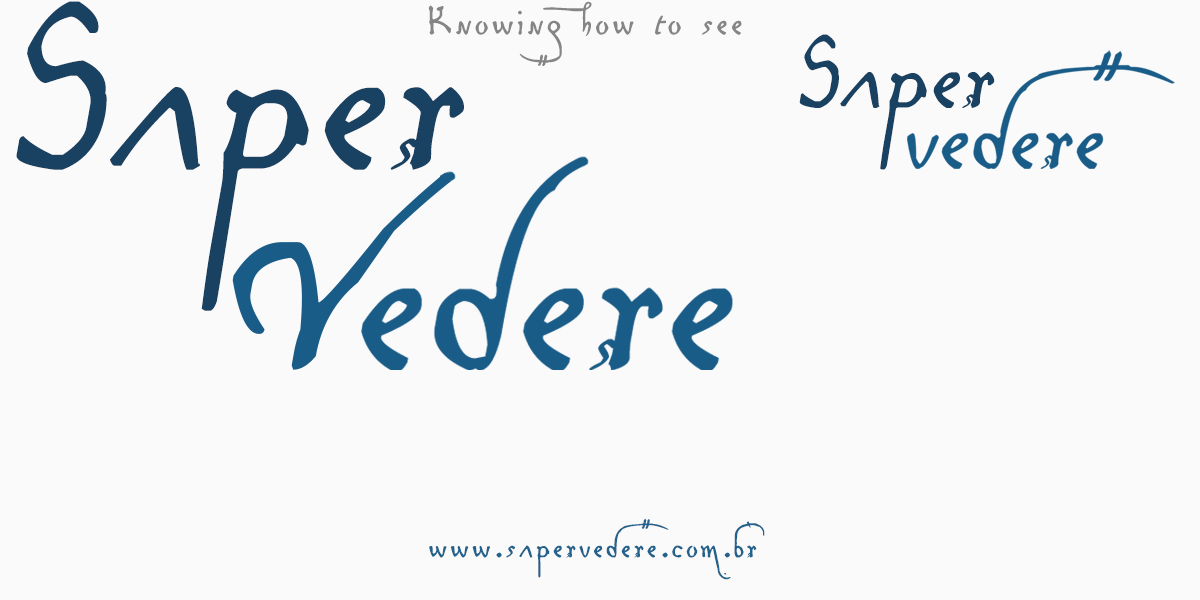
<style>
.page{position:relative;width:1200px;height:600px;background:#fafafa}
.page>*{position:absolute;margin:0}
.t1{font:337.6px "LeonardoHandF";color:#194162;font-style:italic}
.t2{font:55.9px "LeonardoHandF";letter-spacing:0.05em;color:#858585}
.t3{font:147.1px "LeonardoHandF";color:#194162;font-style:italic}
.t4{font:47.9px "LeonardoHandF";letter-spacing:0.05em;color:#23628d}
</style>
<div class="page">
<p class="t1" style="left:16px;top:1px;width:448px;height:310px">Saper</p>
<p class="t2" style="left:428px;top:1px;width:314px;height:65px">Knowing how to see</p>
<p class="t3" style="left:799px;top:34px;width:196px;height:136px">Saper</p>
<p class="t4" style="left:428px;top:518px;width:337px;height:62px">www.sapervedere.com.br</p>
</div>
